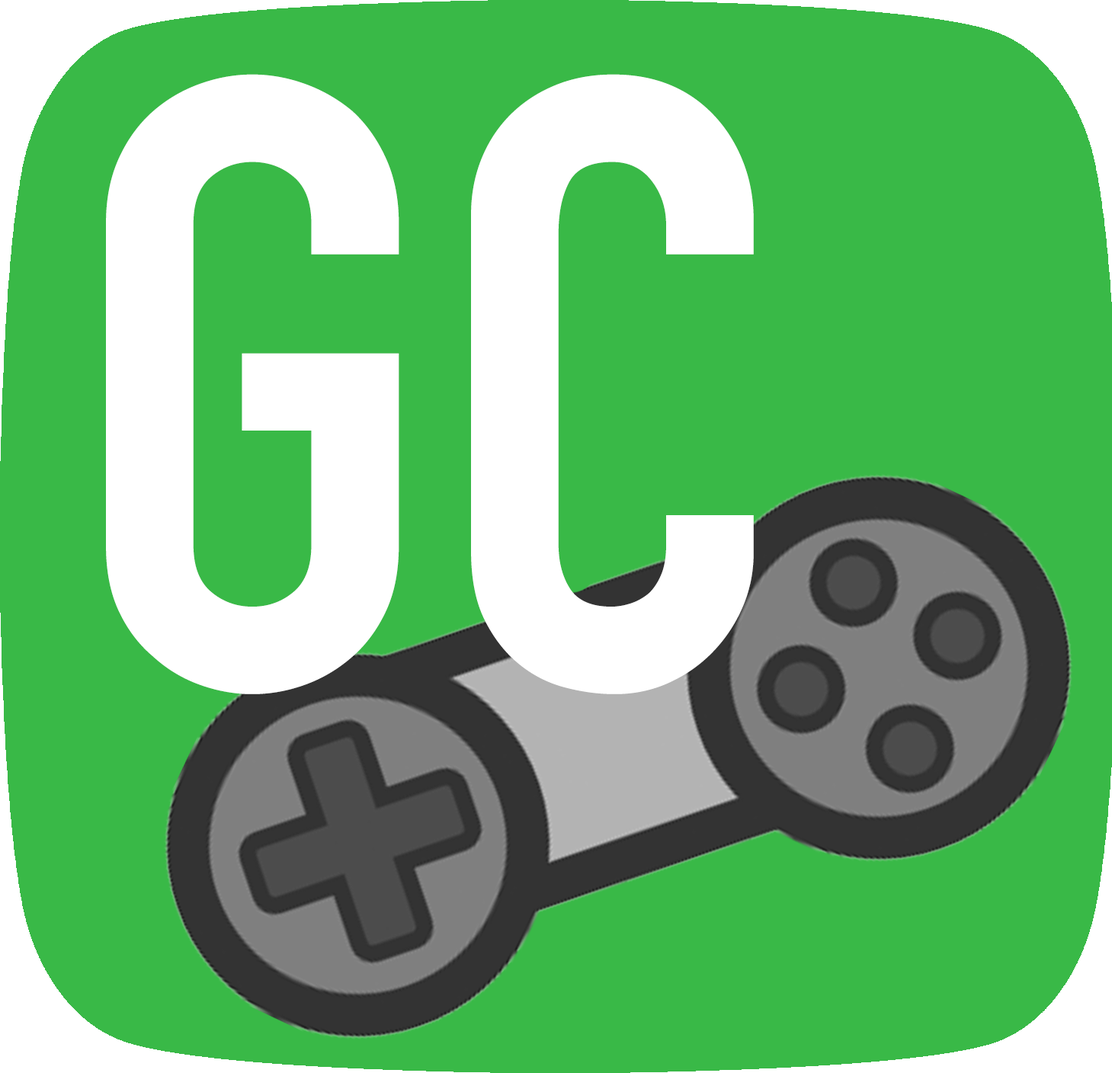
<style>
.page{position:relative;width:1112px;height:1073px;background:#39b947}
.page>*{position:absolute;margin:0}
.t1{font:855.5px "DINCondensed-Bold";color:#ffffff}
</style>
<div class="page">
<p class="t1" style="left:106px;top:74px;width:648px;height:620px">GC</p>
</div>
